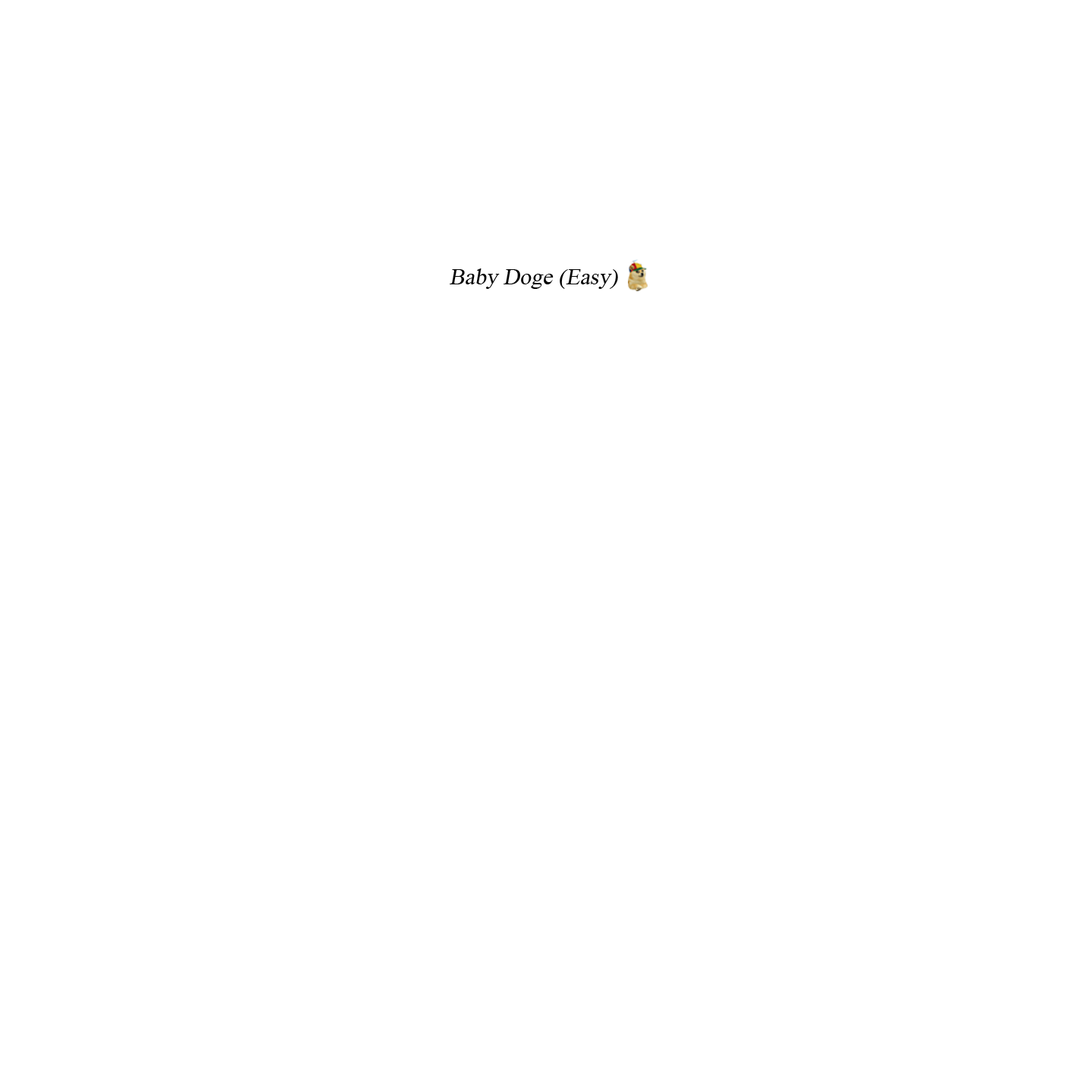
<style>
.page{position:relative;width:1092px;height:1092px;background:#ffffff}
.page>*{position:absolute;margin:0}
.t1{font:22.7px "TimesNewRomanPSMT";color:#040404;font-style:italic}
</style>
<div class="page">
<p class="t1" style="left:450px;top:268px;width:168px;height:21px">Baby Doge (Easy)</p>
</div>
